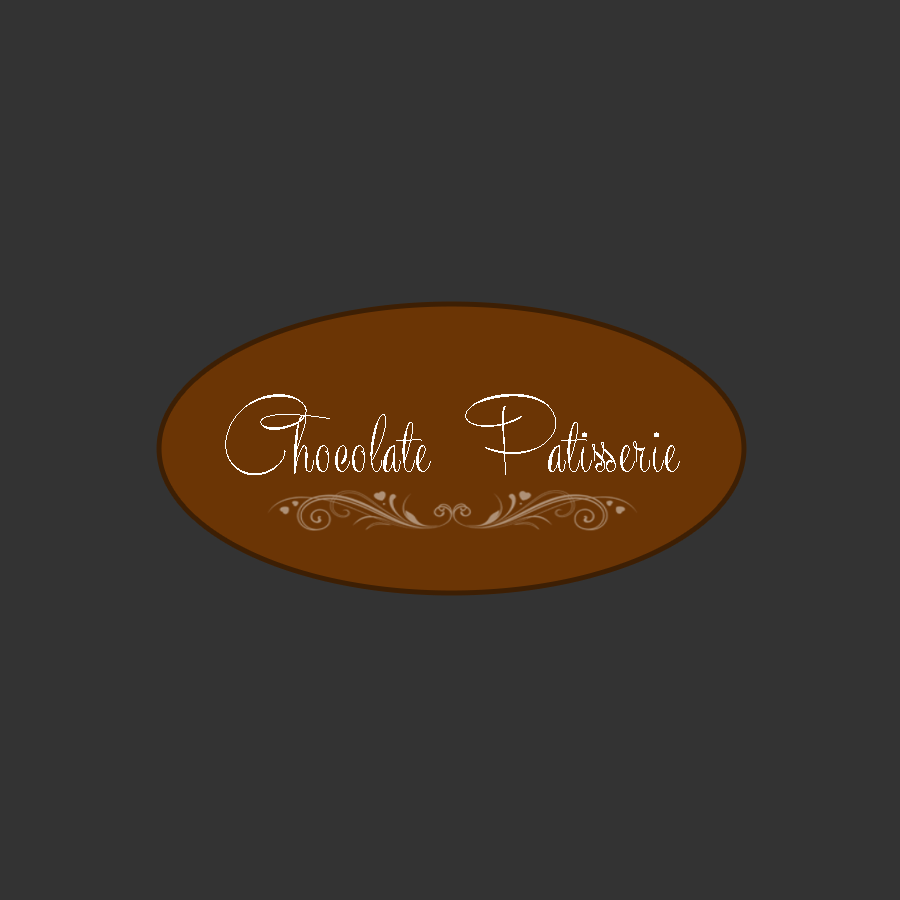
<style>
.page{position:relative;width:900px;height:900px;background:#333333}
.page>*{position:absolute;margin:0}
.t1{font:112.2px "RecordaScriptPersonalUseOnly";letter-spacing:0.025em;color:#ffffff;scale:0.91 1}
</style>
<div class="page">
<p class="t1" style="left:225px;top:394px;width:455px;height:81px">Chocolate Patisserie</p>
</div>
